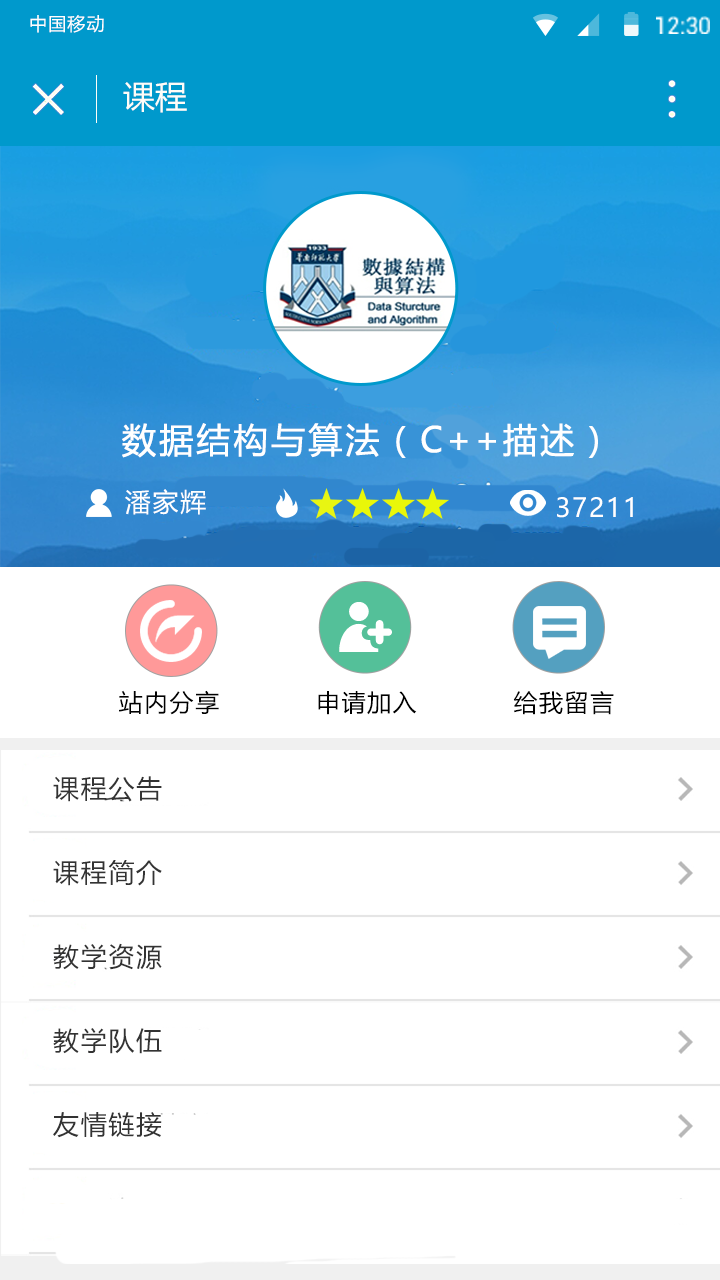
<style>
.page{position:relative;width:720px;height:1280px;background:#ffffff}
.page>*{position:absolute;margin:0}
.t1{font:17.9px "MicrosoftYaHei";letter-spacing:0.065em;color:#ffffff}
.t2{font:32px "MicrosoftYaHei";color:#fefdf8}
.t3{font:34.1px "MicrosoftYaHei";letter-spacing:0.065em;color:#ffffff;font-weight:bold}
.t4{font:26.1px "MicrosoftYaHei";letter-spacing:0.065em;color:#ffffff}
.t5{font:23.9px "MicrosoftYaHei";letter-spacing:0.065em;color:#000000}
.t6{font:26px/42px "MicrosoftYaHei";letter-spacing:0.065em;color:#333333}
</style>
<div class="page">
<p class="t1" style="left:30px;top:15px;width:74px;height:18px">中国移动</p>
<p class="t2" style="left:123px;top:82px;width:64px;height:31px">课程</p>
<p class="t3" style="left:122px;top:423px;width:476px;height:35px">数据结构与算法（C++描述）</p>
<p class="t4" style="left:125px;top:489px;width:81px;height:26px">潘家辉</p>
<p class="t4" style="left:557px;top:497px;width:76px;height:21px">37211</p>
<p class="t5" style="left:119px;top:690px;width:495px;height:25px">站内分享           申请加入           给我留言</p>
<p class="t6" style="left:53px;top:776px;width:109px;height:362px">课程公告<br><br>课程简介<br><br>教学资源<br><br>教学队伍<br><br>友情链接</p>
</div>
